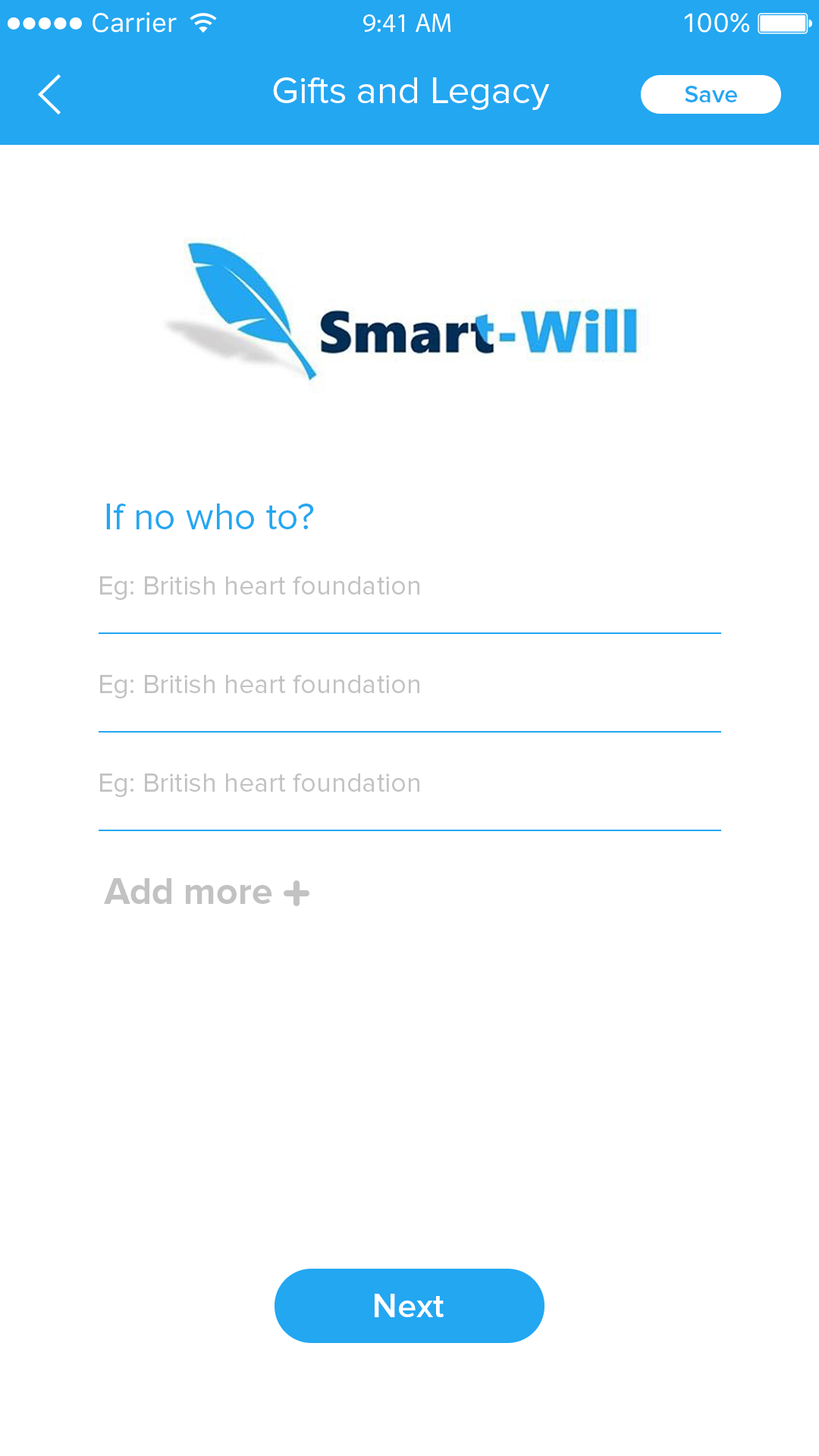
<style>
.page{position:relative;width:819px;height:1456px;background:#ffffff}
.page>*{position:absolute;margin:0}
.t1{font:38.1px "ProximaNova-Regular";color:#ffffff}
.t2{font:24.7px "ProximaNova-Semibold";color:#23a7f1}
.t3{font:37.8px "ProximaNova-Regular";color:#23a7f1}
.t4{font:27.3px "ProximaNova-Regular";color:#c1c1c1}
.t5{font:37.8px "ProximaNova-Bold";color:#c2c2c2}
.t6{font:34.1px "ProximaNova-Semibold";color:#ffffff}
</style>
<div class="page">
<p class="t1" style="left:273px;top:77px;width:277px;height:33px">Gifts and Legacy</p>
<p class="t2" style="left:685px;top:86px;width:52px;height:16px">Save</p>
<p class="t3" style="left:106px;top:504px;width:208px;height:25px">If no who to?</p>
<p class="t4" style="left:100px;top:576px;width:319px;height:24px">Eg: British heart foundation</p>
<p class="t4" style="left:100px;top:675px;width:319px;height:23px">Eg: British heart foundation</p>
<p class="t4" style="left:100px;top:773px;width:319px;height:24px">Eg: British heart foundation</p>
<p class="t5" style="left:104px;top:878px;width:168px;height:26px">Add more</p>
<p class="t6" style="left:375px;top:1294px;width:69px;height:23px">Next</p>
</div>
